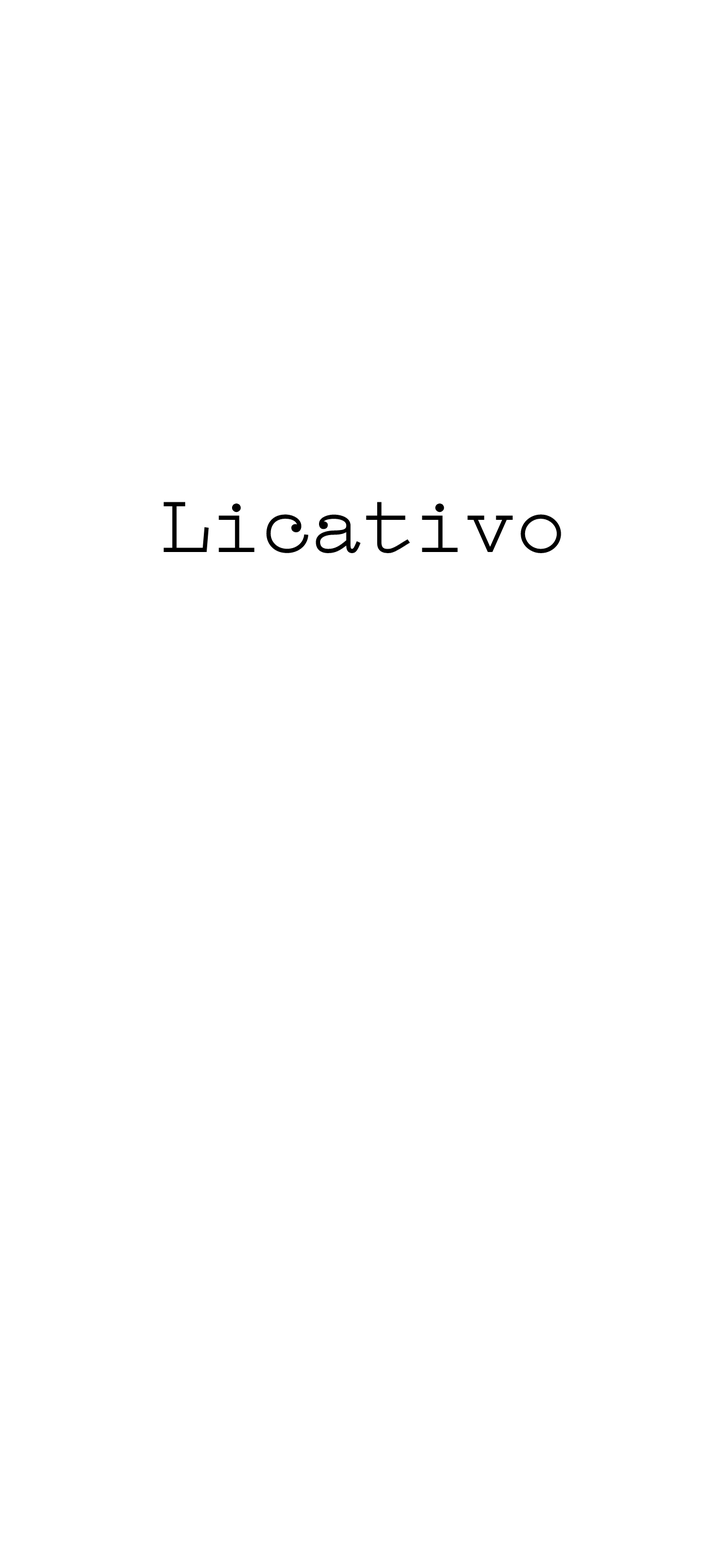
<style>
.page{position:relative;width:725px;height:1568px;background:#ffffff}
.page>*{position:absolute;margin:0}
.t1{font:84.7px "Compagnon-Roman";color:#000000}
</style>
<div class="page">
<p class="t1" style="left:163px;top:502px;width:398px;height:51px">Licativo</p>
</div>
